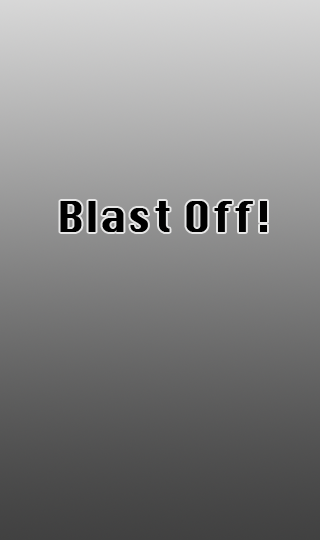
<style>
.page{position:relative;width:320px;height:540px}
.page>*{position:absolute;margin:0}
.t1{font:41.9px "Silom";color:#000000}
</style>
<div class="page">
<p class="t1" style="left:60px;top:201px;width:207px;height:31px">Blast Off!</p>
</div>
